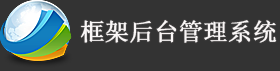
<style>
.page{position:relative;width:280px;height:71px;background:#333333}
.page>*{position:absolute;margin:0}
.t1{font:24px "SimSun";color:#faf7f7;font-weight:bold}
</style>
<div class="page">
<p class="t1" style="left:80px;top:20px;width:197px;height:23px">框架后台管理系统</p>
</div>
